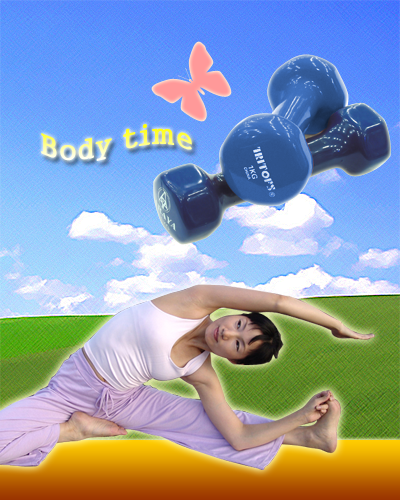
<style>
.page{position:relative;width:400px;height:500px}
.page>*{position:absolute;margin:0}
.t1{font:28px "Gungsuh"}
</style>
<div class="page">
<p class="t1" style="left:41px;top:124px;width:151px;height:37px">Body time</p>
</div>
